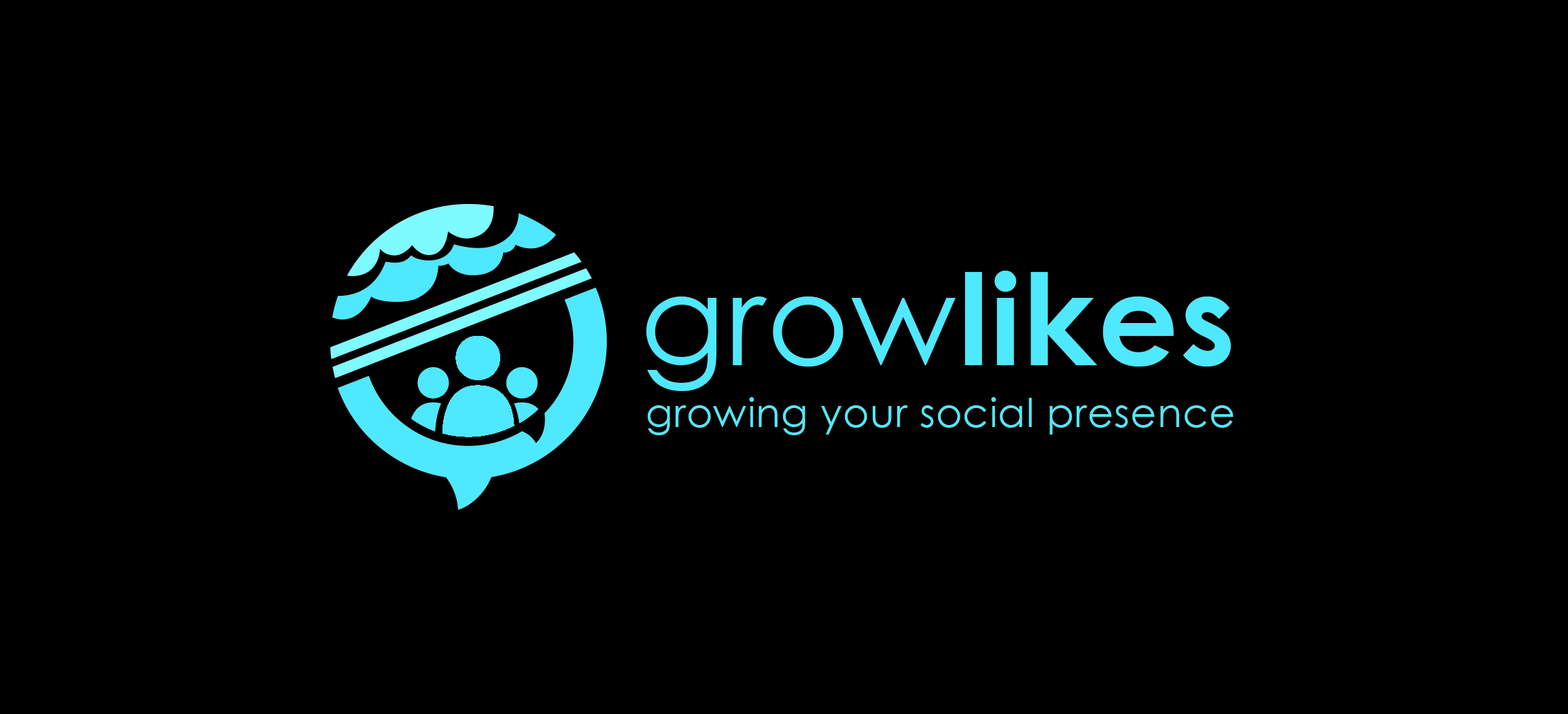
<style>
.page{position:relative;width:1568px;height:714px;background:#000000}
.page>*{position:absolute;margin:0}
.t1{font:126.2px "CenturyGothic-Bold";letter-spacing:0.015em;color:#4ee8ff}
.t2{font:126.2px "CenturyGothic";letter-spacing:0.015em;color:#4ee8ff}
.t3{font:40.3px "CenturyGothic";letter-spacing:0.015em;color:#4ee8ff}
</style>
<div class="page">
<p class="t1" style="left:646px;top:270px;width:585px;height:121px"><span class="t2">grow</span>likes</p>
<p class="t3" style="left:647px;top:397px;width:587px;height:38px">growing your social presence</p>
</div>
